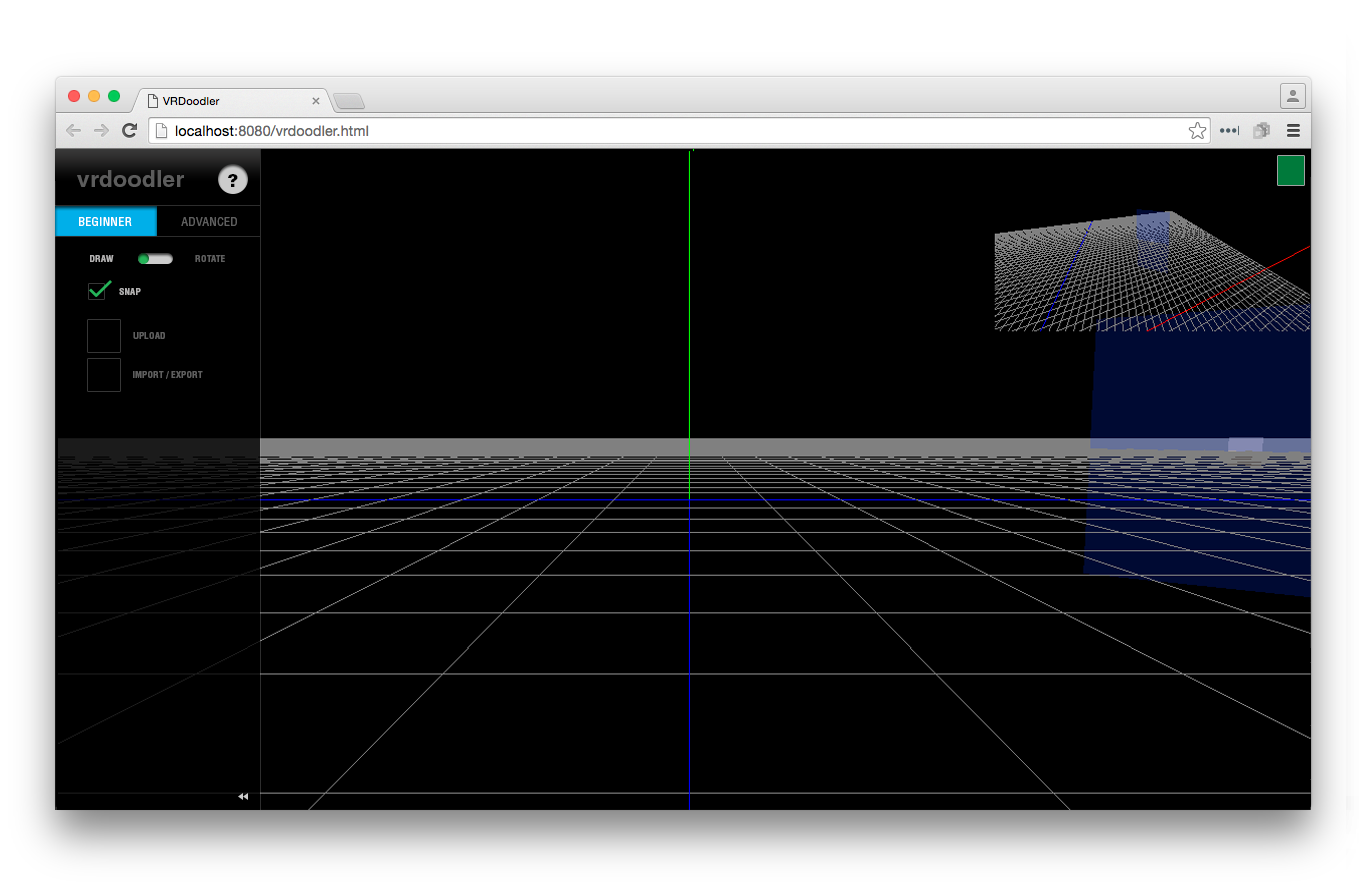
<style>
.page{position:relative;width:1367px;height:889px;background:#000000}
.page>*{position:absolute;margin:0}
.t1{font:23px "HelveticaLTStd-Bold";letter-spacing:0.01em;color:#5f5f5f}
.t2{font:17px "HelveticaLTStd-Blk";letter-spacing:0.025em;color:#000000;text-transform:uppercase}
.t3{font:12px "HelveticaLTStd-Cond";letter-spacing:0.025em;color:#ffffff;text-transform:uppercase}
.t4{font:12px "HelveticaLTStd-Cond";letter-spacing:0.025em;color:#5f5f5f;text-transform:uppercase}
.t5{font:9px "HelveticaLTStd-BoldCond";letter-spacing:0.025em;color:#b3b2b2;text-transform:uppercase}
.t6{font:9px "HelveticaLTStd-BoldCond";letter-spacing:0.025em;color:#5f5f5f;text-transform:uppercase}
</style>
<div class="page">
<p class="t1" style="left:77px;top:170px;width:107px;height:17px;opacity:0.95">vrdoodler</p>
<p class="t2" style="left:228px;top:174px;width:10px;height:13px">?</p>
<p class="t3" style="left:79px;top:217px;width:53px;height:9px">beginner</p>
<p class="t4" style="left:181px;top:217px;width:56px;height:9px">advanced</p>
<p class="t5" style="left:90px;top:255px;width:24px;height:7px">draw</p>
<p class="t6" style="left:195px;top:255px;width:30px;height:7px">rotate</p>
<p class="t5" style="left:119px;top:288px;width:22px;height:7px">snap</p>
<p class="t6" style="left:133px;top:332px;width:32px;height:7px">upload</p>
<p class="t6" style="left:133px;top:371px;width:70px;height:8px">import / export</p>
</div>
